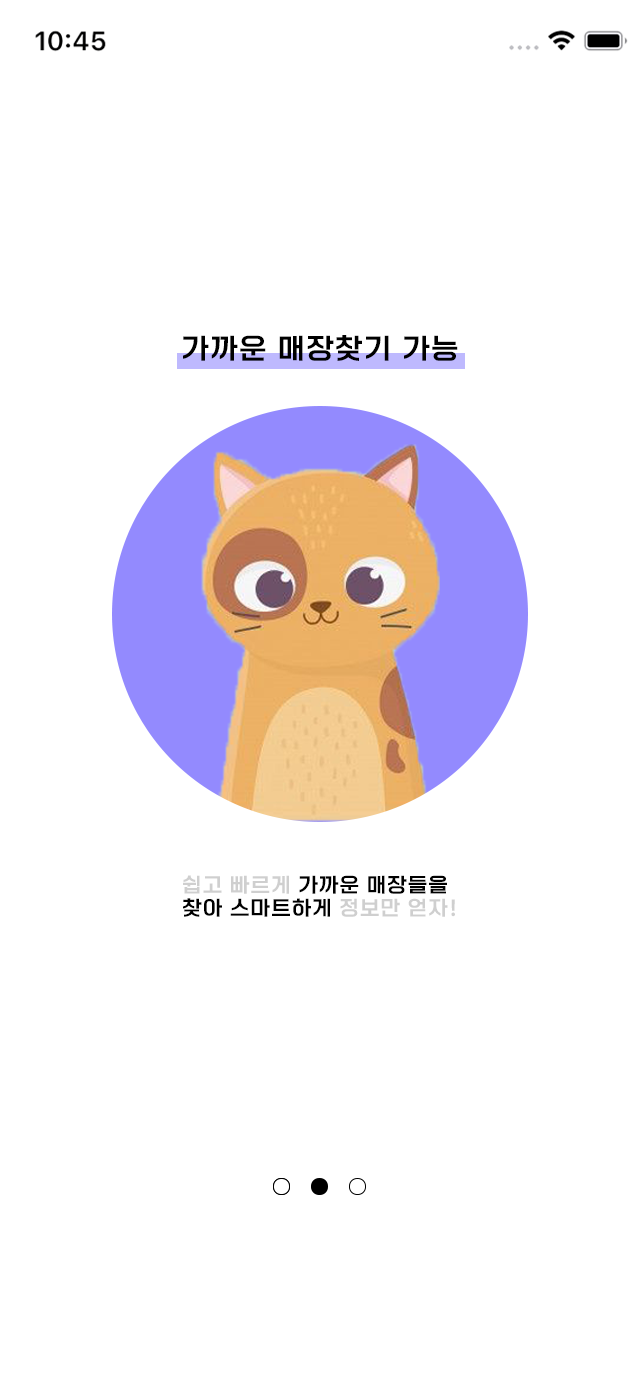
<style>
.page{position:relative;width:640px;height:1385px;background:#ffffff}
.page>*{position:absolute;margin:0}
.t1{font:28px "ONEMobileTitleRegular";letter-spacing:0.08em;color:#000000}
.t2{font:19.9px "ONEMobileTitleRegular";letter-spacing:0.08em;color:#000000}
.t3{font:19.9px "ONEMobileTitleRegular";letter-spacing:0.08em;color:#cfcfcf}
</style>
<div class="page">
<p class="t1" style="left:183px;top:335px;width:275px;height:26px">가까운 매장찾기 가능</p>
<p class="t2" style="left:183px;top:875px;width:272px;height:42px"><span class="t3">쉽고 빠르게</span> 가까운 매장들을<br>찾아 스마트하게<span class="t3"> 정보만 얻자!</span></p>
</div>
